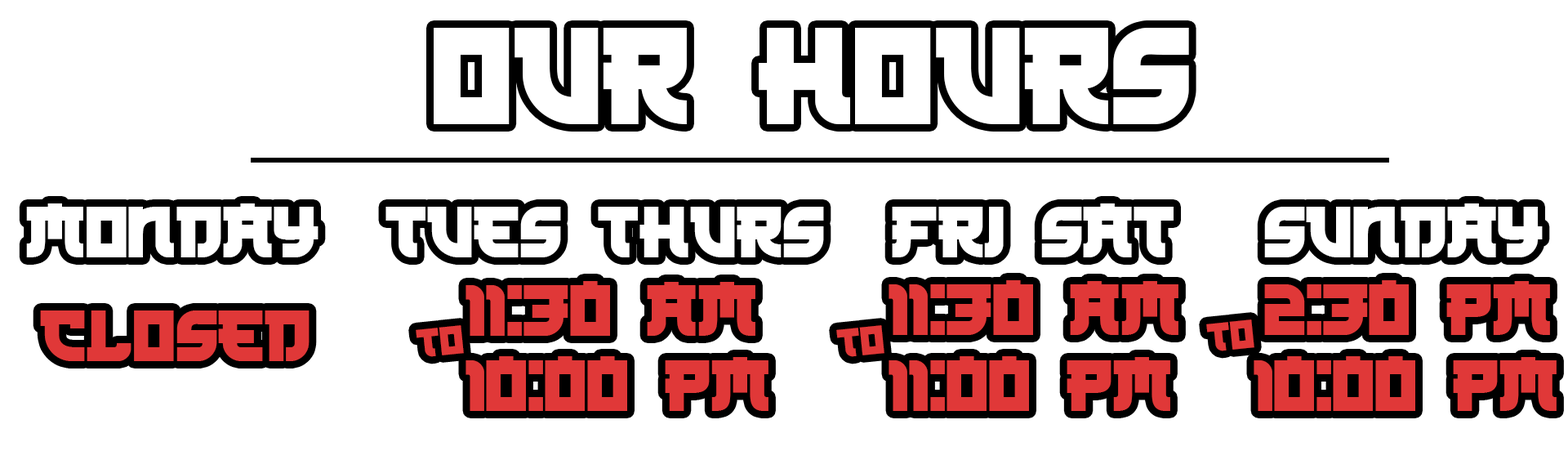
<style>
.page{position:relative;width:1568px;height:451px;background:#ffffff}
.page>*{position:absolute;margin:0}
.t1{font:142.4px "Kamikaze-Regular";color:#ffffff}
.t2{font:74.7px "Kamikaze-Regular";color:#ffffff}
.t3{font:74.7px "Kamikaze-Regular";color:#e03838}
.t4{font:41.2px "Kamikaze-Regular";color:#e03838}
</style>
<div class="page">
<p class="t1" style="left:434px;top:28px;width:755px;height:96px">OUR HOURS</p>
<p class="t2" style="left:26px;top:203px;width:292px;height:54px">Monday</p>
<p class="t2" style="left:385px;top:207px;width:439px;height:50px">Tues thurs</p>
<p class="t2" style="left:892px;top:203px;width:282px;height:54px">fri sat</p>
<p class="t2" style="left:1264px;top:203px;width:279px;height:54px">sunday</p>
<p class="t3" style="left:466px;top:281px;width:289px;height:55px">11:30 am</p>
<p class="t3" style="left:889px;top:280px;width:289px;height:55px">11:30 am</p>
<p class="t3" style="left:1264px;top:280px;width:286px;height:55px">2:30 pm</p>
<p class="t3" style="left:40px;top:310px;width:270px;height:51px">closed</p>
<p class="t4" style="left:416px;top:325px;width:48px;height:32px;rotate:-6deg">to</p>
<p class="t4" style="left:836px;top:325px;width:48px;height:32px;rotate:-6deg">to</p>
<p class="t4" style="left:1206px;top:319px;width:48px;height:32px;rotate:-6deg">to</p>
<p class="t3" style="left:466px;top:356px;width:302px;height:55px">10:00 pm</p>
<p class="t3" style="left:889px;top:356px;width:281px;height:55px">11:00 pm</p>
<p class="t3" style="left:1254px;top:356px;width:303px;height:55px">10:00 pm</p>
</div>
